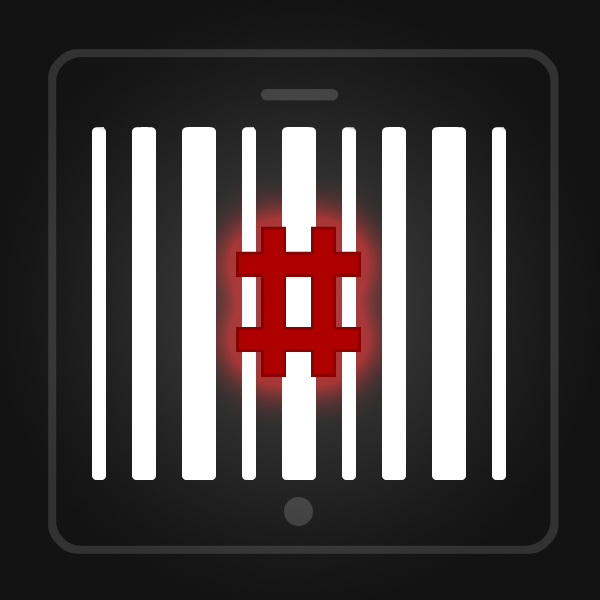
<style>
.page{position:relative;width:600px;height:600px}
.page>*{position:absolute;margin:0}
.t1{font:400px "BrightonTwo-Gothika-NBP";color:#af0000}
</style>
<div class="page">
<p class="t1" style="left:236px;top:226px;width:125px;height:151px">#</p>
</div>
